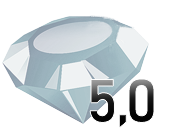
<style>
.page{position:relative;width:175px;height:133px;background:#ffffff}
.page>*{position:absolute;margin:0}
.t1{font:60px "Bahnschrift-SemiBold";letter-spacing:-0.05em}
</style>
<div class="page">
<p class="t1" style="left:90px;top:79px;width:64px;height:49px">5,0</p>
</div>
